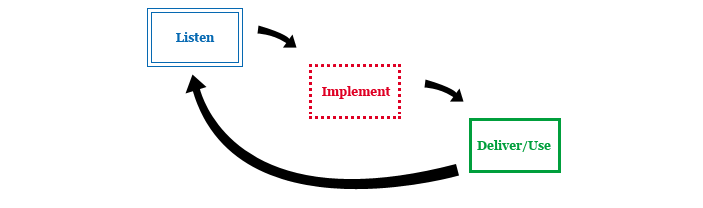
<style>
.page{position:relative;width:703px;height:208px;background:#ffffff}
.page>*{position:absolute;margin:0}
.t1{font:12px "Georgia-Bold";color:#0669b2}
.t2{font:12px "Georgia-Bold";color:#df0024}
.t3{font:12px "Georgia-Bold";color:#009f3c}
</style>
<div class="page">
<p class="t1" style="left:176px;top:32px;width:39px;height:10px">Listen</p>
<p class="t2" style="left:322px;top:86px;width:69px;height:13px">Implement</p>
<p class="t3" style="left:477px;top:140px;width:74px;height:12px">Deliver/Use</p>
</div>
